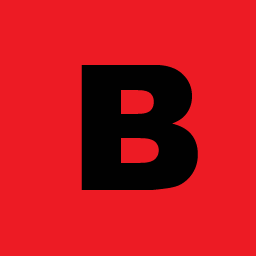
<style>
.page{position:relative;width:256px;height:256px;background:#ed1b24}
.page>*{position:absolute;margin:0}
.t1{font:174.7px "Arial-Black";color:#010101}
</style>
<div class="page">
<p class="t1" style="left:81px;top:65px;width:117px;height:125px">B</p>
</div>
